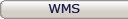
<style>
.page{position:relative;width:128px;height:19px;background:#d4d0c8}
.page>*{position:absolute;margin:0}
.t1{font:12.5px "Verdana";color:#1b1b4c}
</style>
<div class="page">
<p class="t1" style="left:48px;top:4px;width:32px;height:9px">WMS</p>
</div>
